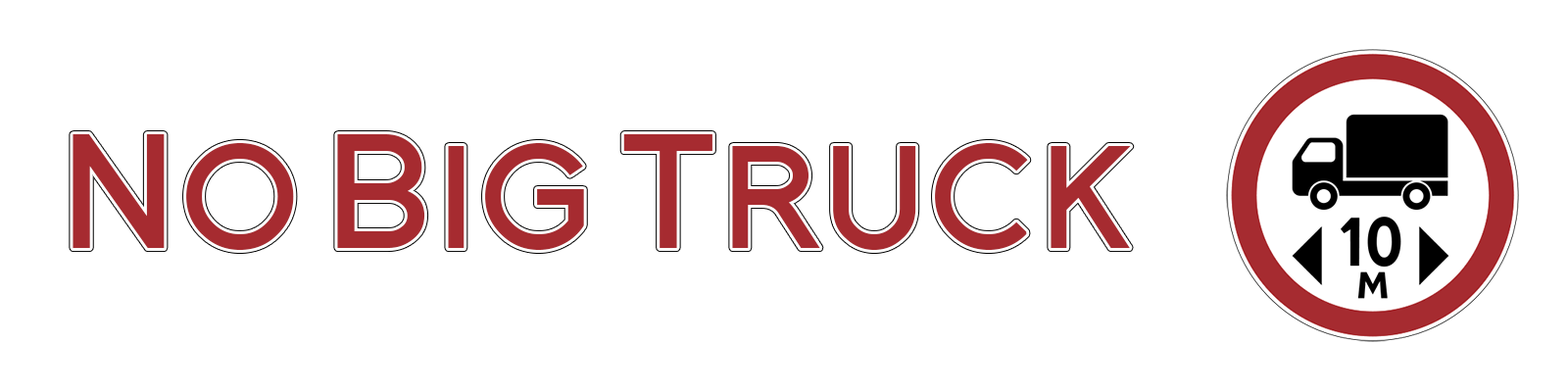
<style>
.page{position:relative;width:1568px;height:392px;background:#ffffff}
.page>*{position:absolute;margin:0}
.t1{font:156.8px "FlorencesansSC-Bold";letter-spacing:0.04em;color:#a62b30}
</style>
<div class="page">
<p class="t1" style="left:73px;top:134px;width:1058px;height:116px">No Big Truck</p>
</div>
